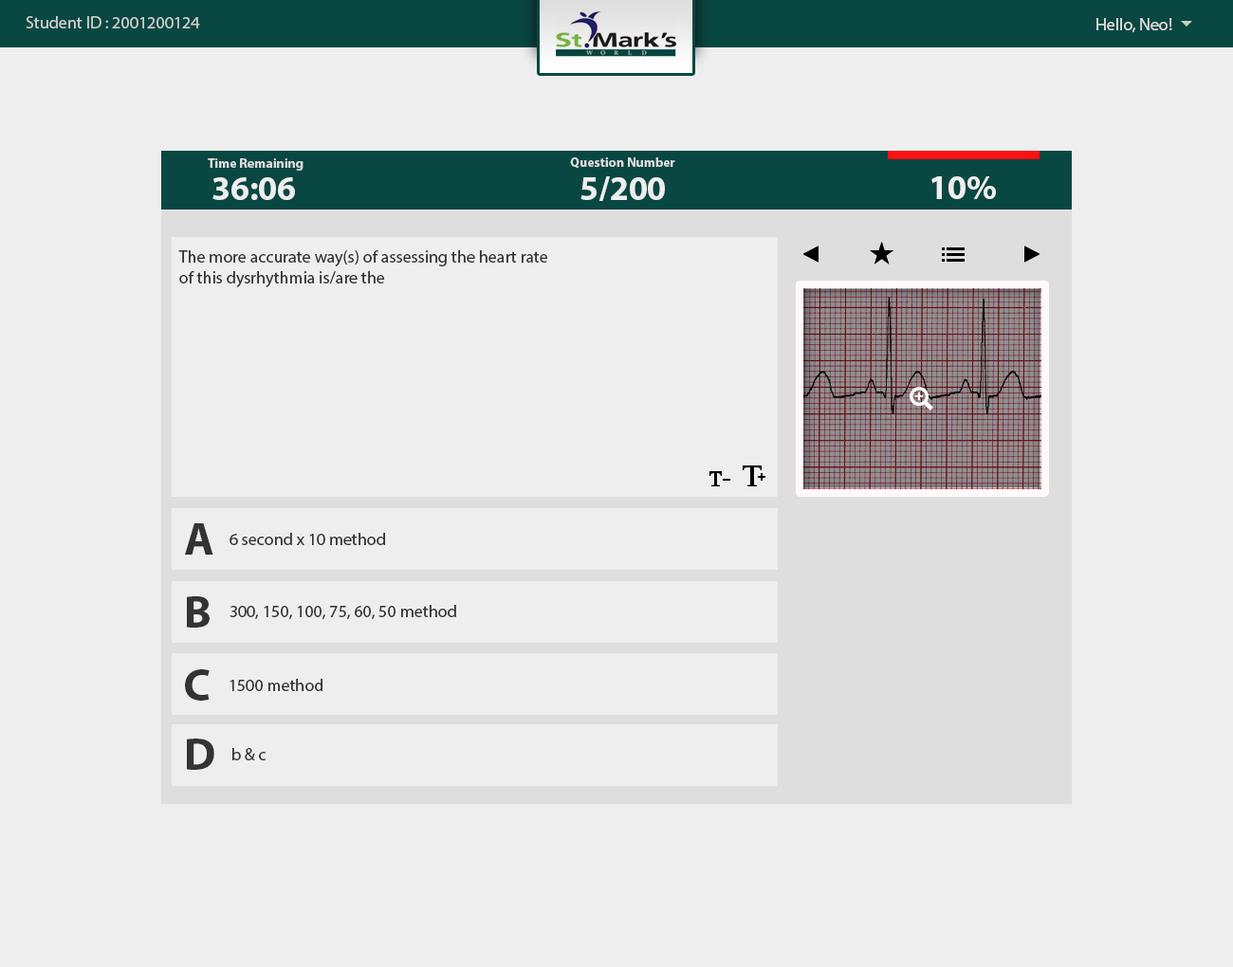
<style>
.page{position:relative;width:1233px;height:967px;background:#eeeeee}
.page>*{position:absolute;margin:0}
.t1{font:17.1px "MyriadPro-Regular";color:#cccccc}
.t2{font:17.1px "MyriadPro-Regular";color:#dddddd}
.t3{font:13.3px "MyriadPro-Bold";color:#dddddd}
.t4{font:34.1px "MyriadPro-Bold";color:#eeeeee}
.t5{font:17.1px "MyriadPro-Regular";color:#333333}
.t6{font:45.5px "MyriadPro-Bold";color:#333333}
</style>
<div class="page">
<p class="t1" style="left:26px;top:16px;width:174px;height:12px">Student ID : 2001200124</p>
<p class="t2" style="left:1096px;top:18px;width:76px;height:14px">Hello, Neo!</p>
<p class="t3" style="left:208px;top:158px;width:95px;height:13px">Time Remaining</p>
<p class="t3" style="left:570px;top:157px;width:105px;height:12px">Question Number</p>
<p class="t4" style="left:212px;top:177px;width:83px;height:23px">36:06</p>
<p class="t4" style="left:580px;top:176px;width:85px;height:25px">5/200</p>
<p class="t4" style="left:931px;top:176px;width:65px;height:23px">10%</p>
<p class="t5" style="left:178px;top:250px;width:369px;height:37px">The more accurate way(s) of assessing the heart rate <br>of this dysrhythmia is/are the</p>
<p class="t6" style="left:185px;top:523px;width:28px;height:32px">A</p>
<p class="t5" style="left:229px;top:533px;width:156px;height:12px">6 second x 10 method</p>
<p class="t6" style="left:187px;top:596px;width:23px;height:32px">B</p>
<p class="t5" style="left:229px;top:605px;width:227px;height:14px">300, 150, 100, 75, 60, 50 method</p>
<p class="t6" style="left:185px;top:669px;width:25px;height:32px">C</p>
<p class="t5" style="left:229px;top:679px;width:93px;height:12px">1500 method</p>
<p class="t6" style="left:187px;top:739px;width:27px;height:31px">D</p>
<p class="t5" style="left:232px;top:748px;width:34px;height:13px">b &amp; c</p>
</div>
